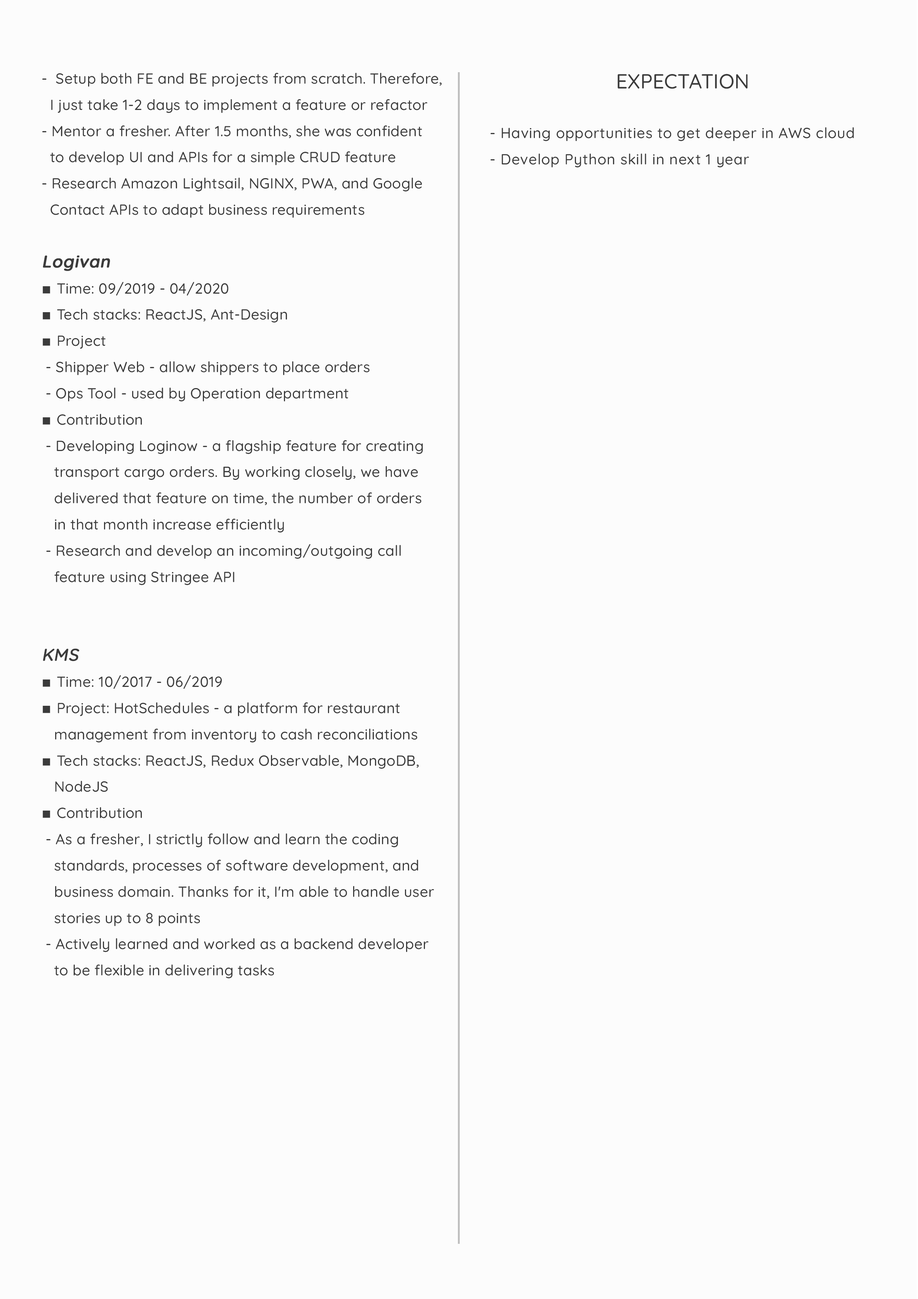
<style>
.page{position:relative;width:918px;height:1299px;background:#fcfcfc}
.page>*{position:absolute;margin:0}
.t1{font:14.7px/26.2px "Quicksand-Medium";letter-spacing:0.01em;color:#3b3b3b}
.t2{font:16.9px/26.2px "Quicksand-SemiBold";letter-spacing:0.01em;color:#3b3b3b;font-weight:bold;font-style:italic}
.t3{font:14.7px/26.2px "DejaVuSans";letter-spacing:0.015em;color:#3b3b3b}
.t4{font:16.9px/26.2px "Quicksand-Medium";letter-spacing:0.01em;color:#3b3b3b;font-weight:bold;font-style:italic}
.t5{font:20.4px "Quicksand-Medium";color:#3b3b3b}
.t6{font:14.7px/26.2px "Quicksand-Medium";letter-spacing:0.03em;color:#3b3b3b}
</style>
<div class="page">
<p class="t1" style="left:42px;top:73px;width:400px;height:905px">-  Setup both FE and BE projects from scratch. Therefore, <br>  I just take 1-2 days to implement a feature or refactor<br>- Mentor a fresher. After 1.5 months, she was confident <br>  to develop UI and APIs for a simple CRUD feature<br>- Research Amazon Lightsail, NGINX, PWA, and Google <br>  Contact APIs to adapt business requirements<br><span class="t2"><br>Logivan<br></span><span class="t3">▪ </span>Time: 09/2019 - 04/2020<br><span class="t3">▪ </span>Tech stacks: ReactJS, Ant-Design<br><span class="t3">▪ </span>Project<br> - Shipper Web - allow shippers to place orders<br> - Ops Tool - used by Operation department<br><span class="t3">▪ </span>Contribution<br> - Developing Loginow - a flagship feature for creating <br>   transport cargo orders. By working closely, we have <br>   delivered that feature on time, the number of orders <br>   in that month increase efficiently<br> - Research and develop an incoming/outgoing call <br>   feature using Stringee API<br><br><br><span class="t4">KMS<br></span><span class="t3">▪ </span>Time: 10/2017 - 06/2019<br><span class="t3">▪ </span>Project: HotSchedules - a platform for restaurant <br>   management from inventory to cash reconciliations<br><span class="t3">▪ </span>Tech stacks: ReactJS, Redux Observable, MongoDB, <br>   NodeJS<br><span class="t3">▪ </span>Contribution<br> - As a fresher, I strictly follow and learn the coding <br>   standards, processes of software development, and <br>   business domain. Thanks for it, I'm able to handle user <br>   stories up to 8 points<br> - Actively learned and worked as a backend developer <br>   to be flexible in delivering tasks</p>
<p class="t5" style="left:618px;top:74px;width:130px;height:15px">EXPECTATION</p>
<p class="t6" style="left:491px;top:127px;width:363px;height:40px">- Having opportunities to get deeper in AWS cloud<br>- Develop Python skill in next 1 year</p>
</div>
